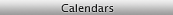
<style>
.page{position:relative;width:173px;height:15px}
.page>*{position:absolute;margin:0}
.t1{font:11px "LucidaGrande";color:#181818}
</style>
<div class="page">
<p class="t1" style="left:61px;top:4px;width:53px;height:8px">Calendars</p>
</div>
